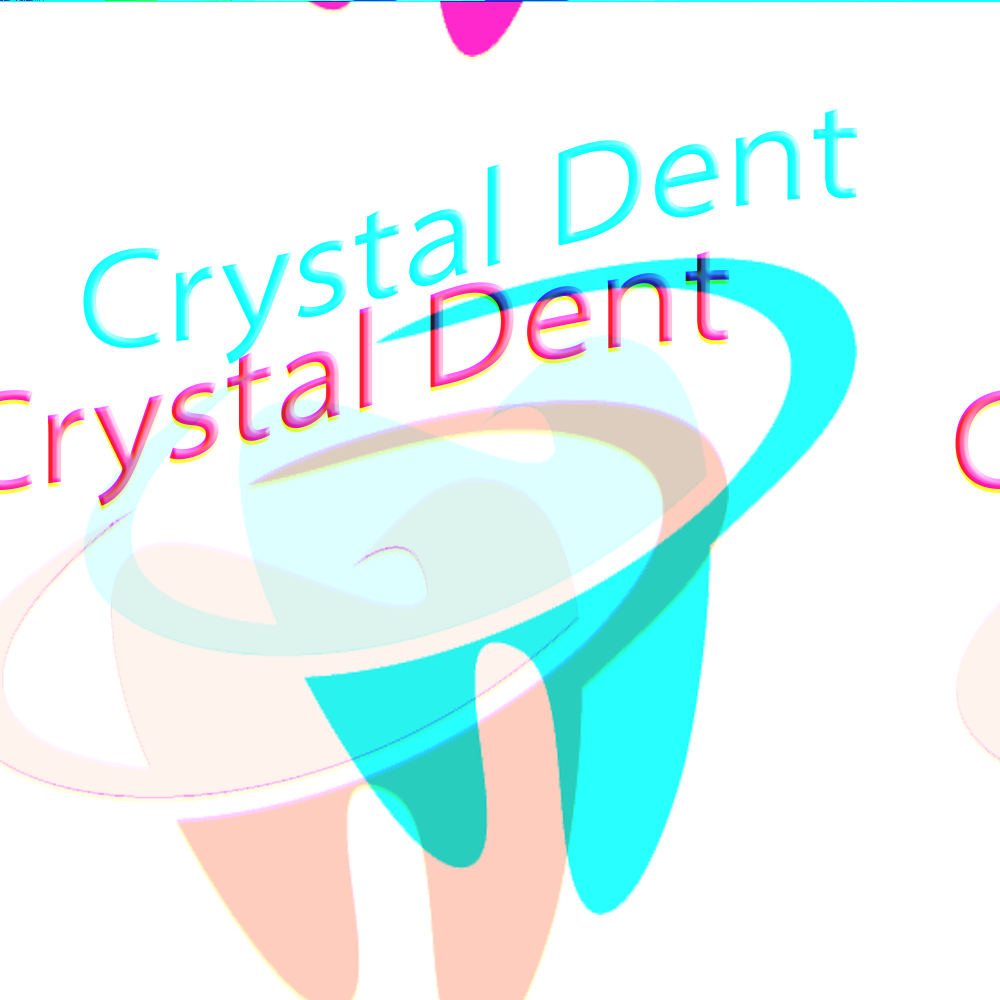
<style>
.page{position:relative;width:1000px;height:1000px;background:#ffffff}
.page>*{position:absolute;margin:0}
.t1{font:139.8px "MyriadPro-Regular";scale:1.1 1}
</style>
<div class="page">
<p class="t1" style="left:83px;top:107px;width:775px;height:255px">Crystal Dent</p>
</div>
